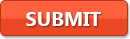
<style>
.page{position:relative;width:130px;height:39px;background:#ff613d}
.page>*{position:absolute;margin:0}
.t1{font:20px "SegoeUI-Bold";color:#ffffff}
</style>
<div class="page">
<p class="t1" style="left:26px;top:12px;width:75px;height:14px">SUBMIT</p>
</div>
